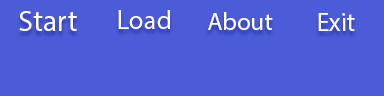
<style>
.page{position:relative;width:384px;height:96px;background:#4c5cd9}
.page>*{position:absolute;margin:0}
.t1{font:29.5px "MyriadPro-Regular";color:#ffffff}
.t2{font:27px "MyriadPro-Regular";color:#ffffff}
.t3{font:25px "MyriadPro-Regular";color:#ffffff}
.t4{font:25.6px "MyriadPro-Regular";color:#ffffff}
</style>
<div class="page">
<p class="t1" style="left:19px;top:11px;width:58px;height:20px">Start</p>
<p class="t2" style="left:118px;top:10px;width:52px;height:19px">Load</p>
<p class="t3" style="left:208px;top:12px;width:65px;height:18px">About</p>
<p class="t4" style="left:318px;top:13px;width:37px;height:18px">Exit</p>
</div>
